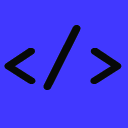
<style>
.page{position:relative;width:128px;height:128px;background:#4138ff}
.page>*{position:absolute;margin:0}
.t1{font:18px "Chalkboard";color:#060808;scale:1.17 1}
</style>
<div class="page">
<p class="t1" style="left:4px;top:25px;width:118px;height:65px">&lt;/&gt;</p>
</div>
